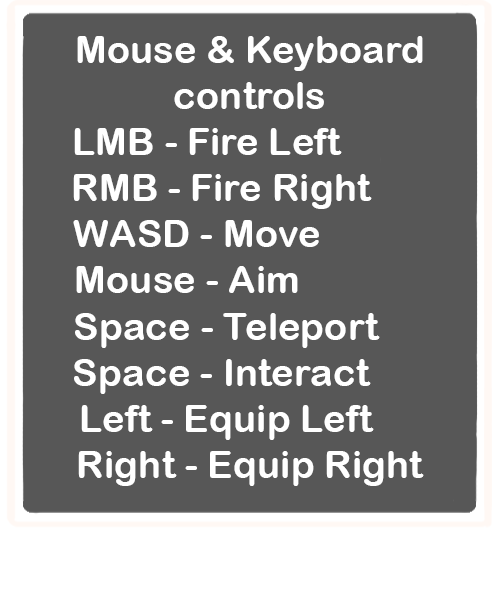
<style>
.page{position:relative;width:500px;height:600px;background:#575757}
.page>*{position:absolute;margin:0}
.t1{font:38.4px "ArialRoundedMTBold";color:#ffffff}
</style>
<div class="page">
<p class="t1" style="left:73px;top:36px;width:351px;height:450px;text-align:center">Mouse &amp; Keyboard<br>controls<br>LMB - Fire Left         <br>        RMB - Fire Right              <br>WASD - Move           <br>Mouse - Aim             <br>Space - Teleport     <br>Space - Interact      <br>Left - Equip Left     <br>Right - Equip Right</p>
</div>
